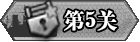
<style>
.page{position:relative;width:140px;height:42px}
.page>*{position:absolute;margin:0}
.t1{font:22px "HYa9gj";color:#ffffff}
</style>
<div class="page">
<p class="t1" style="left:64px;top:10px;width:53px;height:21px">第5关</p>
</div>
